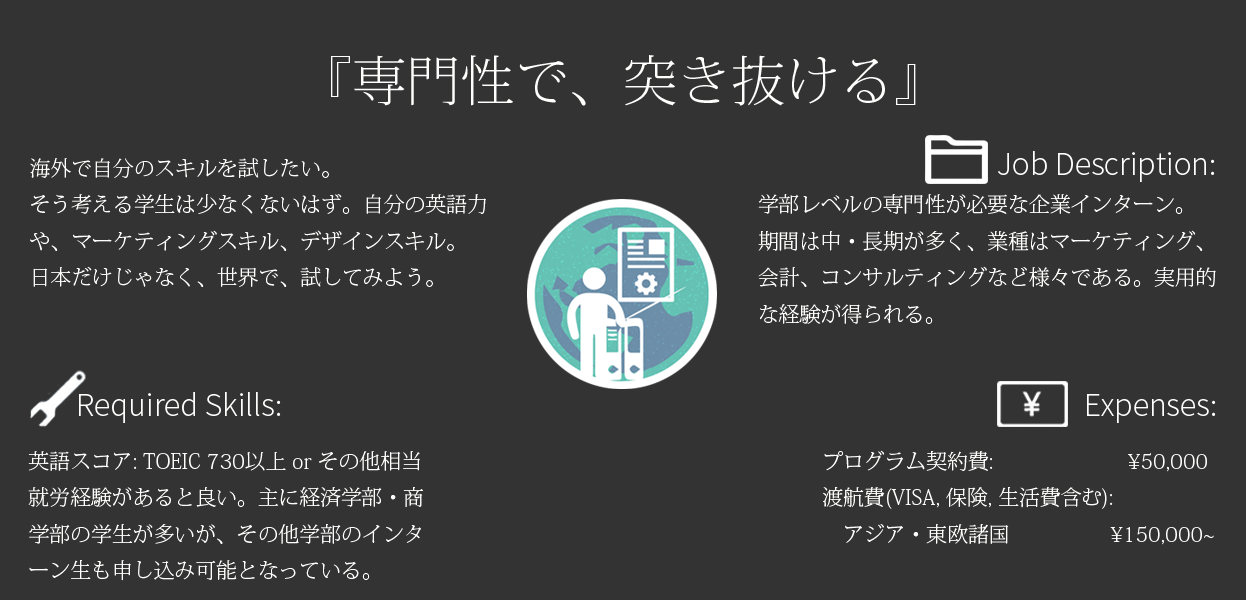
<style>
.page{position:relative;width:1246px;height:600px;background:#333333}
.page>*{position:absolute;margin:0}
.t1{font:54.2px "KozMinPr6N-ExtraLight";color:#fffffe}
.t2{font:20.8px "KozMinPr6N-ExtraLight";color:#fffffe}
.t3{font:33.3px "SourceSansPro-Light";color:#ffffff}
.t4{font:33.3px "SourceSansPro-Light";color:#fffffe}
</style>
<div class="page">
<p class="t1" style="left:331px;top:55px;width:585px;height:51px">『専門性で、突き抜ける』</p>
<p class="t2" style="left:30px;top:158px;width:456px;height:129px">海外で自分のスキルを試したい。<br>そう考える学生は少なくないはず。自分の英語力や、マーケティングスキル、デザインスキル。<br>日本だけじゃなく、世界で、試してみよう。</p>
<p class="t3" style="left:998px;top:151px;width:217px;height:31px">Job Description:</p>
<p class="t2" style="left:758px;top:194px;width:458px;height:130px">学部レベルの専門性が必要な企業インターン。<br>期間は中・長期が多く、業種はマーケティング、会計、コンサルティングなど様々である。実用的な経験が得られる。</p>
<p class="t4" style="left:79px;top:392px;width:202px;height:31px">Required Skills:</p>
<p class="t3" style="left:1087px;top:394px;width:129px;height:29px">Expenses:</p>
<p class="t2" style="left:28px;top:451px;width:395px;height:130px">英語スコア: TOEIC 730以上 or その他相当<br>就労経験があると良い。主に経済学部・商学部の学生が多いが、その他学部のインターン生も申し込み可能となっている。</p>
<p class="t2" style="left:822px;top:450px;width:392px;height:95px">プログラム契約費:        ¥50,000<br>渡航費(VISA, 保険, 生活費含む): <br>　アジア・東欧諸国       ¥150,000~</p>
</div>
